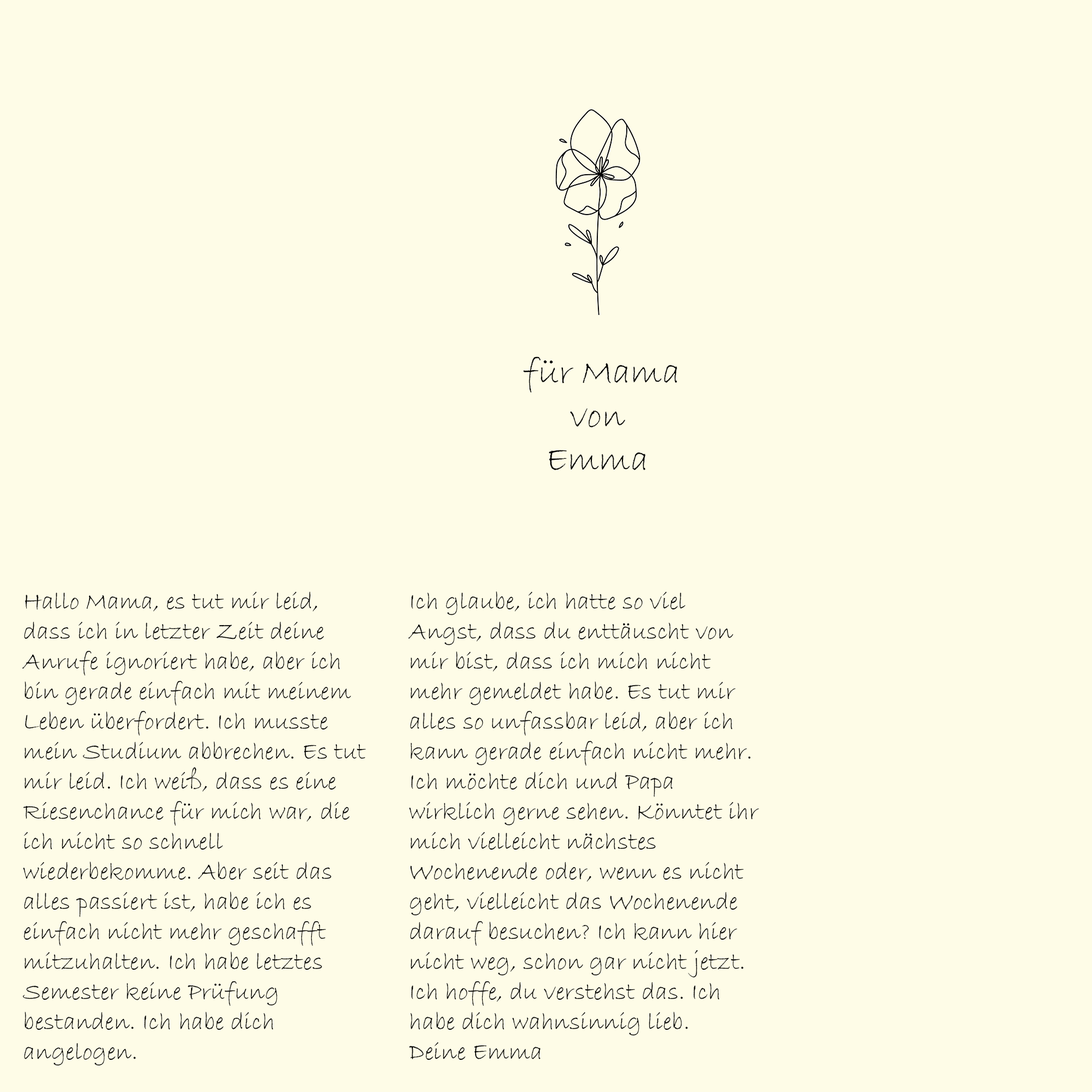
<style>
.page{position:relative;width:1092px;height:1092px;background:#fefce7}
.page>*{position:absolute;margin:0}
.t1{font:36.4px "BradleyHandITC";color:#000000}
.t2{font:25px "BradleyHandITC";color:#000000}
</style>
<div class="page">
<p class="t1" style="left:523px;top:357px;width:155px;height:113px;text-align:center">für Mama<br>von <br>Emma</p>
<p class="t2" style="left:22px;top:591px;width:344px;height:475px">Hallo Mama, es tut mir leid, dass ich in letzter Zeit deine Anrufe ignoriert habe, aber ich bin gerade einfach mit meinem Leben überfordert. Ich musste mein Studium abbrechen. Es tut mir leid. Ich weiß, dass es eine Riesenchance für mich war, die ich nicht so schnell wiederbekomme. Aber seit das alles passiert ist, habe ich es einfach nicht mehr geschafft mitzuhalten. Ich habe letztes Semester keine Prüfung bestanden. Ich habe dich angelogen.</p>
<p class="t2" style="left:408px;top:591px;width:351px;height:469px">Ich glaube, ich hatte so viel Angst, dass du enttäuscht von mir bist, dass ich mich nicht mehr gemeldet habe. Es tut mir alles so unfassbar leid, aber ich kann gerade einfach nicht mehr. Ich möchte dich und Papa wirklich gerne sehen. Könntet ihr mich vielleicht nächstes Wochenende oder, wenn es nicht geht, vielleicht das Wochenende darauf besuchen? Ich kann hier nicht weg, schon gar nicht jetzt. Ich hoffe, du verstehst das. Ich habe dich wahnsinnig lieb. <br>Deine Emma</p>
</div>
